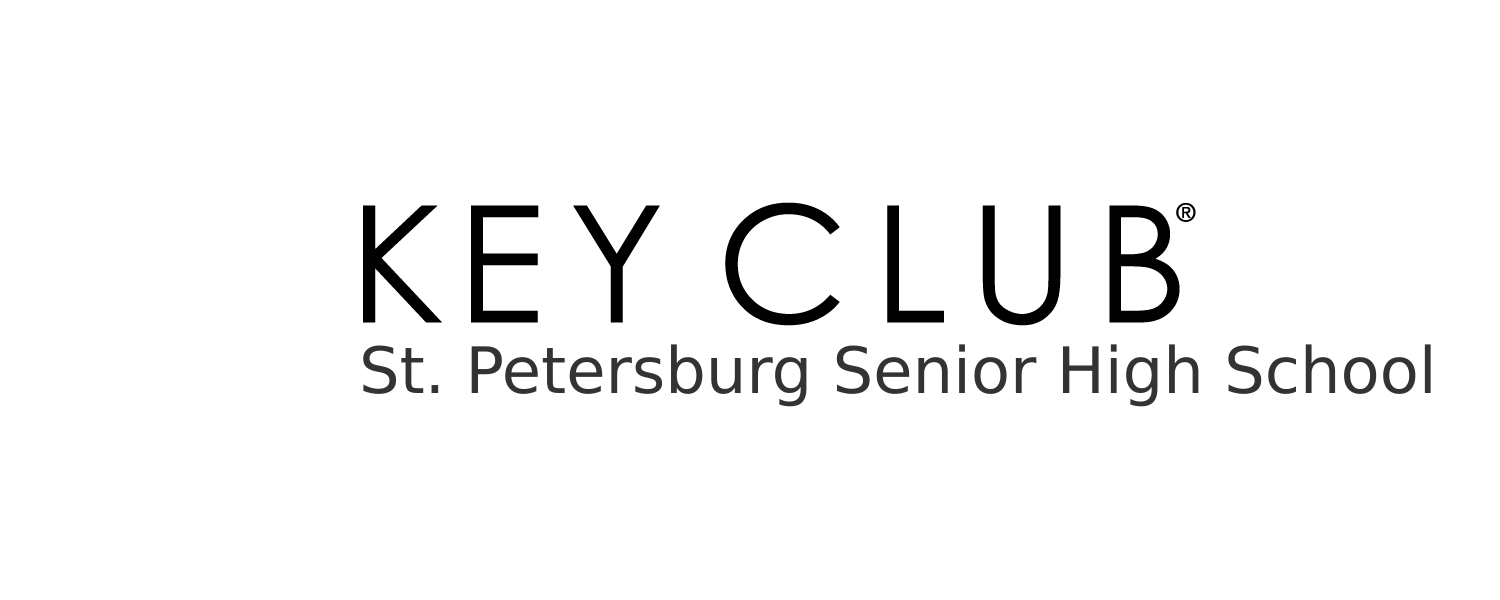
<style>
.page{position:relative;width:1500px;height:600px;background:#ffffff}
.page>*{position:absolute;margin:0}
.t1{font:64px "DejaVuSans";color:#333333}
</style>
<div class="page">
<p class="t1" style="left:363px;top:344px;width:1068px;height:63px">St. Petersburg Senior High School</p>
</div>
